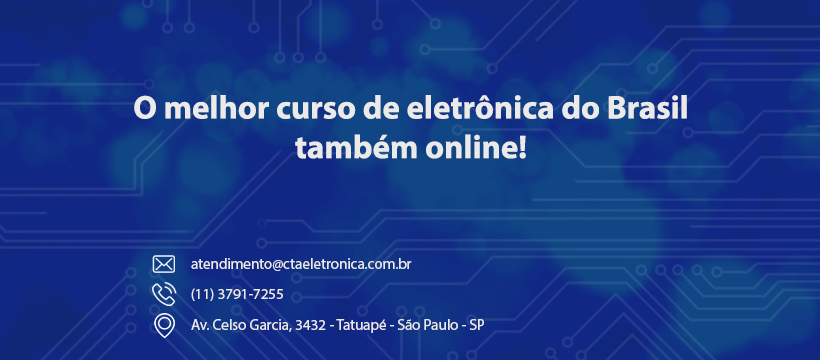
<style>
.page{position:relative;width:820px;height:360px}
.page>*{position:absolute;margin:0}
.t1{font:33px "MyriadPro-Bold";color:#eaeaea}
.t2{font:15px "MyriadPro-Regular";color:#eaeaea}
</style>
<div class="page">
<p class="t1" style="left:134px;top:95px;width:553px;height:64px;text-align:center">O melhor curso de eletrônica do Brasil<br>também online!</p>
<p class="t2" style="left:191px;top:258px;width:221px;height:13px">atendimento@ctaeletronica.com.br</p>
<p class="t2" style="left:191px;top:288px;width:92px;height:13px">(11) 3791-7255</p>
<p class="t2" style="left:191px;top:319px;width:293px;height:14px">Av. Celso Garcia, 3432 - Tatuapé - São Paulo - SP</p>
</div>
